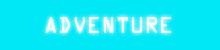
<style>
.page{position:relative;width:220px;height:50px;background:#00e8f6}
.page>*{position:absolute;margin:0}
.t1{font:20px "OCRAStd";color:#ffffff}
</style>
<div class="page">
<p class="t1" style="left:45px;top:17px;width:126px;height:16px">ADVENTURE</p>
</div>
